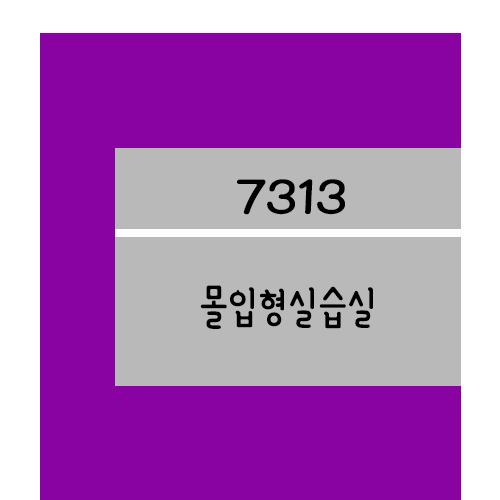
<style>
.page{position:relative;width:500px;height:500px;background:#8803a1}
.page>*{position:absolute;margin:0}
.t1{font:61.2px "YanoljaYacheR";color:#000000;scale:1.18 1}
.t2{font:48px "YanoljaYacheR";color:#000000}
</style>
<div class="page">
<p class="t1" style="left:237px;top:179px;width:108px;height:36px">7313</p>
<p class="t2" style="left:200px;top:285px;width:173px;height:44px">몰입형실습실</p>
</div>
